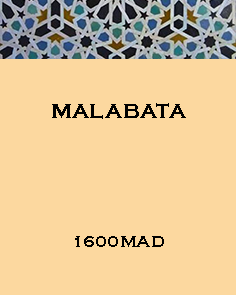
<style>
.page{position:relative;width:236px;height:295px;background:#fcd89f}
.page>*{position:absolute;margin:0}
.t1{font:20.8px "CopperplateGothic-Bold";letter-spacing:0.025em;color:#000000}
.t2{font:16.7px "CopperplateGothic-Bold";letter-spacing:0.025em;color:#000000}
</style>
<div class="page">
<p class="t1" style="left:52px;top:103px;width:134px;height:16px">MALABATA</p>
<p class="t2" style="left:75px;top:236px;width:89px;height:11px">1600MAD</p>
</div>
